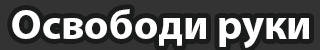
<style>
.page{position:relative;width:320px;height:50px;background:#333333}
.page>*{position:absolute;margin:0}
.t1{font:42.2px "MyriadPro-Bold";color:#ffffff}
</style>
<div class="page">
<p class="t1" style="left:12px;top:9px;width:297px;height:39px">Освободи руки</p>
</div>
